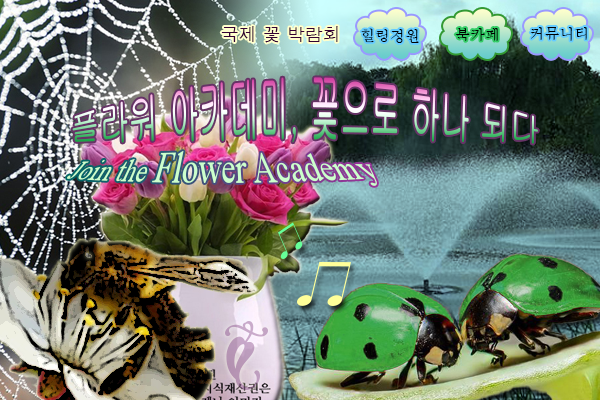
<style>
.page{position:relative;width:600px;height:400px}
.page>*{position:absolute;margin:0}
.t1{font:18px "Dotum";color:#330033}
.t2{font:15px "Batang";color:#000000}
.t3{font:30px "Gulim"}
.t4{font:32px "TimesNewRomanPSMT";color:#ccffcc}
.t5{font:24px "TimesNewRomanPSMT";color:#ccffcc}
</style>
<div class="page">
<p class="t1" style="left:221px;top:26px;width:117px;height:17px">국제 꽃 박람회</p>
<p class="t2" style="left:361px;top:28px;width:58px;height:15px">힐링정원</p>
<p class="t2" style="left:455px;top:28px;width:43px;height:13px">북카페</p>
<p class="t2" style="left:530px;top:27px;width:57px;height:14px">커뮤니티</p>
<p class="t3" style="left:72px;top:77px;width:466px;height:67px">플라워 아카데미, 꽃으로 하나 되다</p>
<p class="t4" style="left:67px;top:151px;width:310px;height:35px"><span class="t5">Join the </span>Flower Academy</p>
</div>
